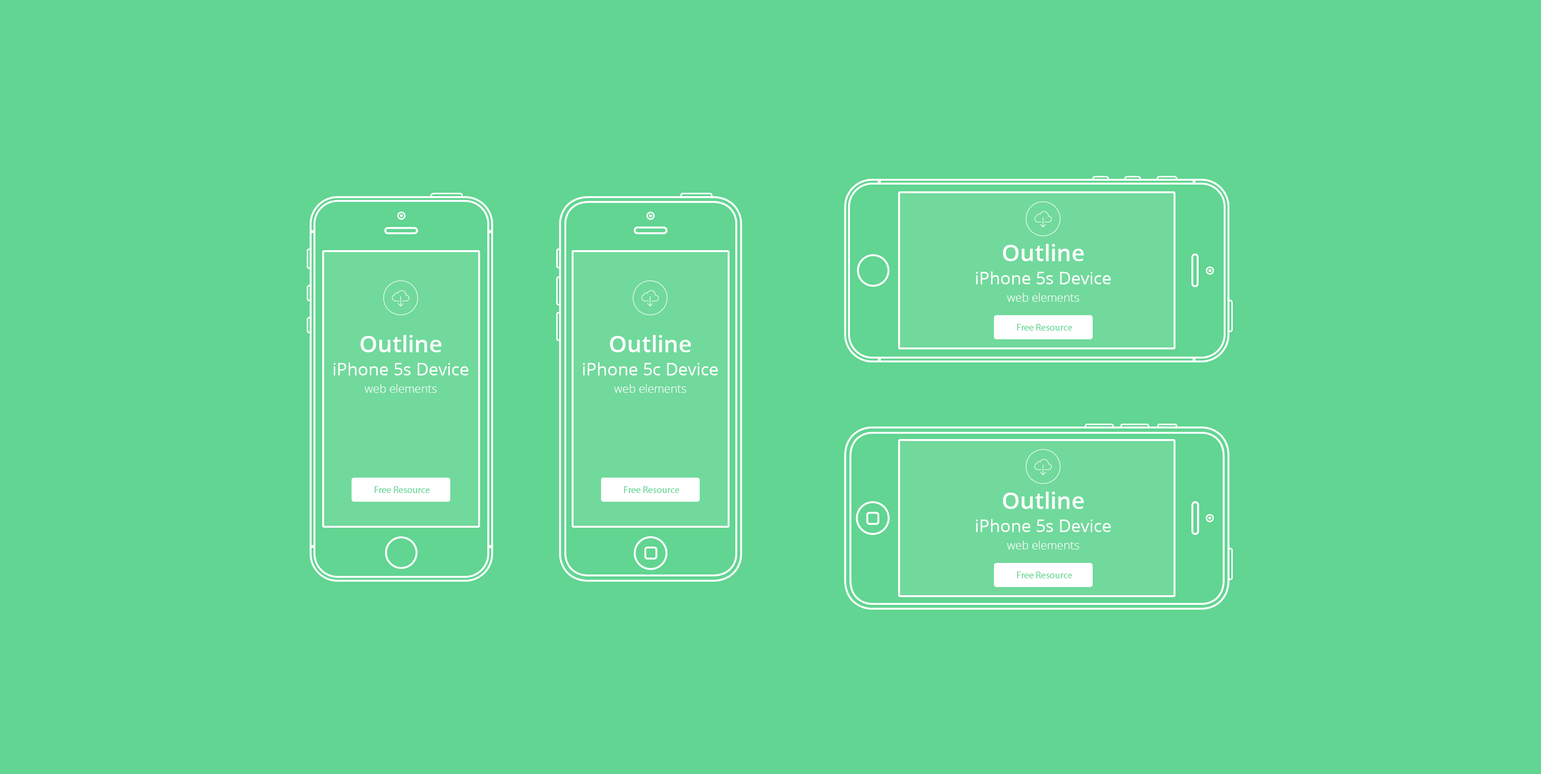
<style>
.page{position:relative;width:1541px;height:774px;background:#61d591}
.page>*{position:absolute;margin:0}
.t1{font:11.6px/17.3px "OpenSans-Light";color:#ffffff}
.t2{font:23.1px/17.3px "OpenSans-Semibold";color:#ffffff}
.t3{font:17.3px/23.1px "OpenSans";color:#ffffff}
.t4{font:17.3px/17.3px "OpenSans";color:#ffffff}
.t5{font:9.6px "MyriadPro-Regular";color:#62d691}
</style>
<div class="page">
<p class="t1" style="left:976px;top:244px;width:135px;height:58px;text-align:center"><span class="t2">Outline <br></span><span class="t3">iPhone 5s </span><span class="t4">Device<br></span>web elements</p>
<p class="t5" style="left:1017px;top:324px;width:55px;height:6px">Free Resource</p>
<p class="t1" style="left:333px;top:335px;width:136px;height:58px;text-align:center"><span class="t2">Outline <br></span><span class="t3">iPhone 5s </span><span class="t4">Device<br></span>web elements</p>
<p class="t1" style="left:583px;top:335px;width:135px;height:58px;text-align:center"><span class="t2">Outline <br></span><span class="t3">iPhone 5c </span><span class="t4">Device<br></span>web elements</p>
<p class="t5" style="left:375px;top:486px;width:55px;height:7px">Free Resource</p>
<p class="t5" style="left:624px;top:486px;width:55px;height:7px">Free Resource</p>
<p class="t1" style="left:976px;top:491px;width:135px;height:58px;text-align:center"><span class="t2">Outline <br></span><span class="t3">iPhone 5s </span><span class="t4">Device<br></span>web elements</p>
<p class="t5" style="left:1017px;top:571px;width:55px;height:7px">Free Resource</p>
</div>
